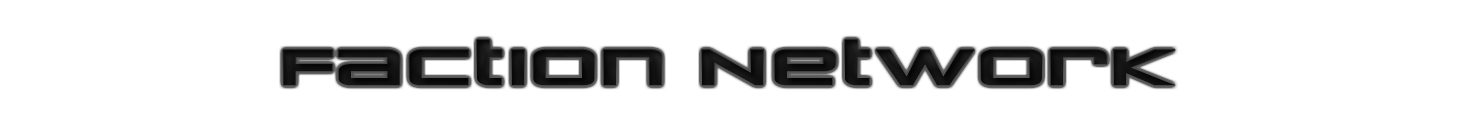
<style>
.page{position:relative;width:1477px;height:128px;background:#ffffff}
.page>*{position:absolute;margin:0}
.t1{font:60px "ZeroTwos";color:#111010;scale:1.75 1}
</style>
<div class="page">
<p class="t1" style="left:283px;top:39px;width:892px;height:47px">Faction Network</p>
</div>
